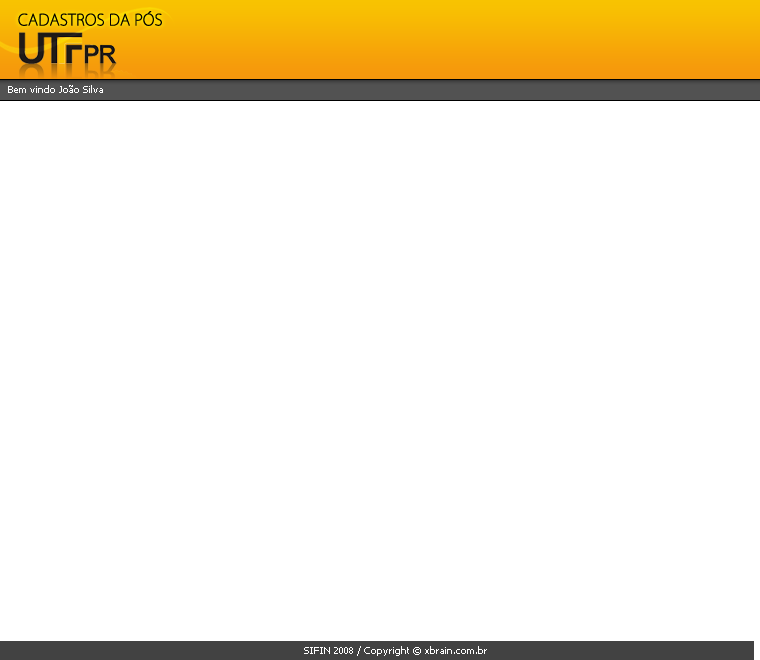
<style>
.page{position:relative;width:760px;height:660px;background:#ffffff}
.page>*{position:absolute;margin:0}
.t1{font:15.3px "KozGoPro-ExtraLight";color:#050200;font-weight:bold}
.t2{font:10px "Tahoma";color:#ffffff}
</style>
<div class="page">
<p class="t1" style="left:18px;top:11px;width:144px;height:15px">CADASTROS DA PÓS</p>
<p class="t2" style="left:8px;top:85px;width:95px;height:8px">Bem vindo João Silva</p>
<p class="t2" style="left:304px;top:646px;width:183px;height:10px">SIFIN 2008 / Copyright © xbrain.com.br</p>
</div>
